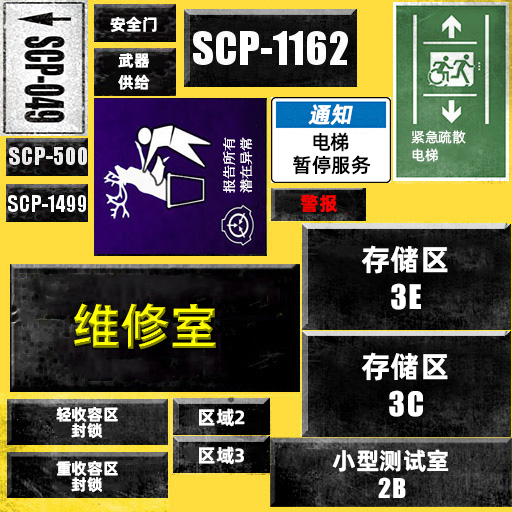
<style>
.page{position:relative;width:512px;height:512px}
.page>*{position:absolute;margin:0}
.t1{font:16px "AlibabaPuHuiTiB";color:#ffffff}
.t2{font:16px/22px "AlibabaPuHuiTiB";color:#ffffff}
.t3{font:22px "AlibabaPuHuiTiM";color:#ffffff;font-weight:bold;font-style:italic}
.t4{font:12.8px/16.5px "ContainmentBreach-Regular";color:#ffffff;scale:1.09 1}
.t5{font:20px "AlibabaPuHuiTiM";color:#000000}
.t6{font:14px/18px "AlibabaPuHuiTiR";color:#ffffff}
.t7{font:19px "AlibabaPuHuiTiB";color:#ff0000}
.t8{font:30px/33px "AlibabaPuHuiTiB";color:#ffffff}
.t9{font:37px/33px "URWImpactW01-Bold";color:#ffffff}
.t10{font:50px "AlibabaPuHuiTiB"}
.t11{font:16px/16px "AlibabaPuHuiTiB";color:#ffffff}
.t12{font:19px "AlibabaPuHuiTiB";color:#ffffff}
.t13{font:24px/24px "AlibabaPuHuiTiB";color:#ffffff}
.t14{font:30px/24px "URWImpactW01-Bold";color:#ffffff}
</style>
<div class="page">
<p class="t1" style="left:110px;top:16px;width:47px;height:16px">安全门</p>
<p class="t2" style="left:118px;top:53px;width:32px;height:37px;text-align:center">武器<br>供给</p>
<p class="t3" style="left:308px;top:104px;width:45px;height:21px">通知</p>
<p class="t4" style="left:223px;top:137px;width:30px;height:56px;rotate:-90deg">报告所有<br>潜在异常</p>
<p class="t5" style="left:313px;top:132px;width:36px;height:20px">电梯</p>
<p class="t6" style="left:411px;top:130px;width:55px;height:32px">紧急疏散<br>电梯</p>
<p class="t5" style="left:293px;top:155px;width:78px;height:20px">暂停服务</p>
<p class="t7" style="left:300px;top:194px;width:37px;height:19px">警报</p>
<p class="t8" style="left:361px;top:245px;width:87px;height:65px;text-align:center">存储区<br><span class="t9">3E</span></p>
<p class="t10" style="left:74px;top:303px;width:142px;height:47px">维修室</p>
<p class="t8" style="left:361px;top:352px;width:87px;height:65px;text-align:center">存储区<br><span class="t9">3C</span></p>
<p class="t11" style="left:56px;top:407px;width:62px;height:32px;text-align:center">轻收容区<br>封锁</p>
<p class="t12" style="left:199px;top:408px;width:46px;height:19px">区域2</p>
<p class="t12" style="left:199px;top:446px;width:45px;height:19px">区域3</p>
<p class="t13" style="left:332px;top:449px;width:117px;height:49px;text-align:center">小型测试室<br><span class="t14">2B</span></p>
<p class="t11" style="left:56px;top:461px;width:62px;height:32px;text-align:center">重收容区<br>封锁</p>
</div>
